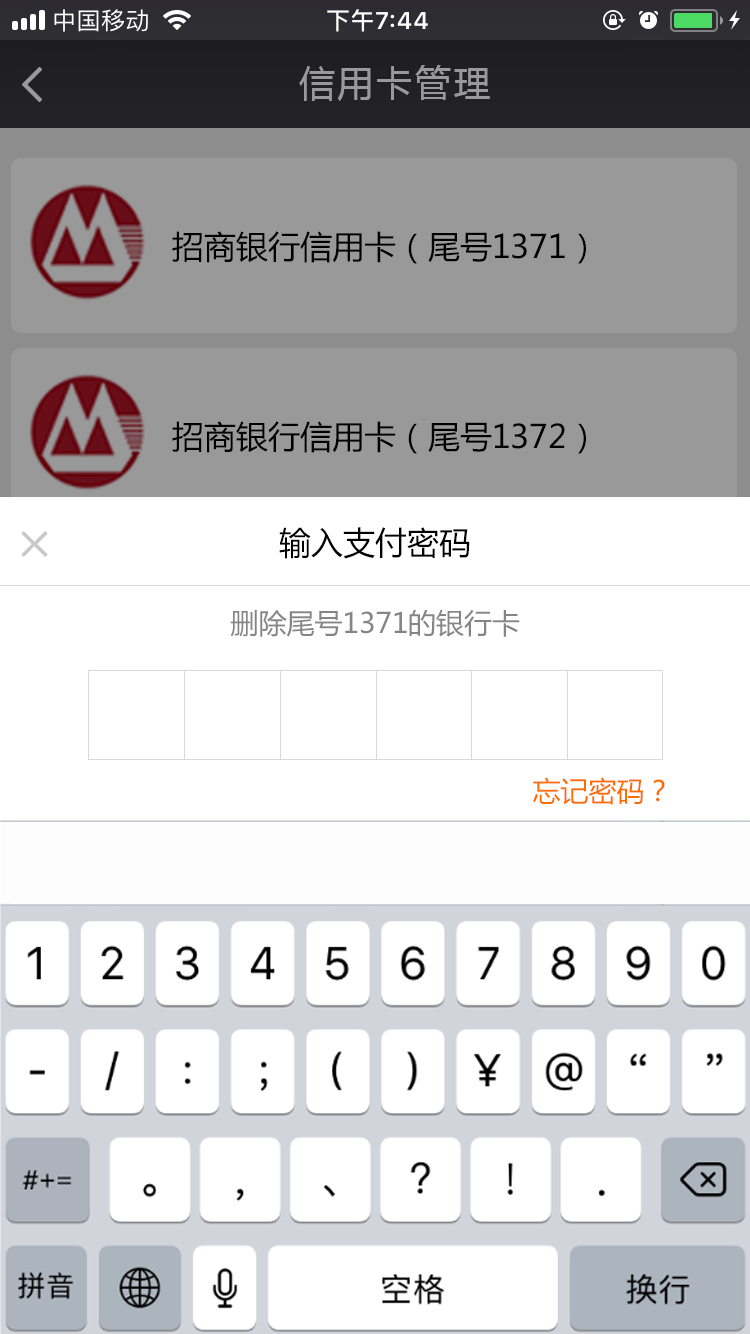
<style>
.page{position:relative;width:750px;height:1334px;background:#ffffff}
.page>*{position:absolute;margin:0}
.t1{font:36px "MicrosoftYaHei";letter-spacing:0.08em;color:#999999}
.t2{font:32px "MicrosoftYaHei";color:#000000}
.t3{font:28px "MicrosoftYaHei";color:#747474}
.t4{font:28px "MicrosoftYaHei";color:#fd6c00}
</style>
<div class="page">
<p class="t1" style="left:299px;top:65px;width:191px;height:36px">信用卡管理</p>
<p class="t2" style="left:172px;top:231px;width:414px;height:33px">招商银行信用卡（尾号1371）</p>
<p class="t2" style="left:172px;top:421px;width:414px;height:33px">招商银行信用卡（尾号1372）</p>
<p class="t2" style="left:279px;top:527px;width:191px;height:32px">输入支付密码</p>
<p class="t3" style="left:230px;top:609px;width:290px;height:28px">删除尾号1371的银行卡</p>
<p class="t4" style="left:533px;top:777px;width:132px;height:28px">忘记密码？</p>
</div>
